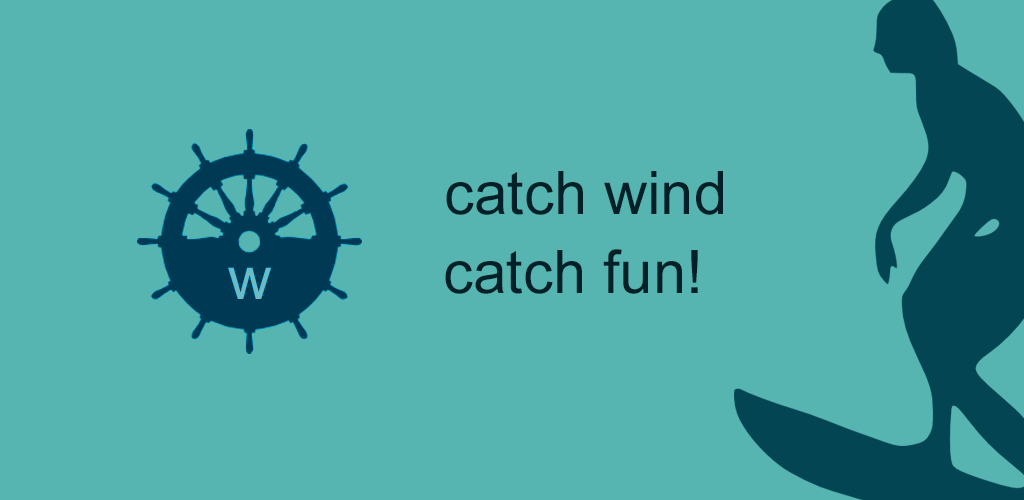
<style>
.page{position:relative;width:1024px;height:500px;background:#56b4b1}
.page>*{position:absolute;margin:0}
.t1{font:60px "ArialMT";color:#012027}
</style>
<div class="page">
<p class="t1" style="left:446px;top:171px;width:277px;height:44px">catch wind</p>
<p class="t1" style="left:445px;top:249px;width:253px;height:45px">catch fun!</p>
</div>
